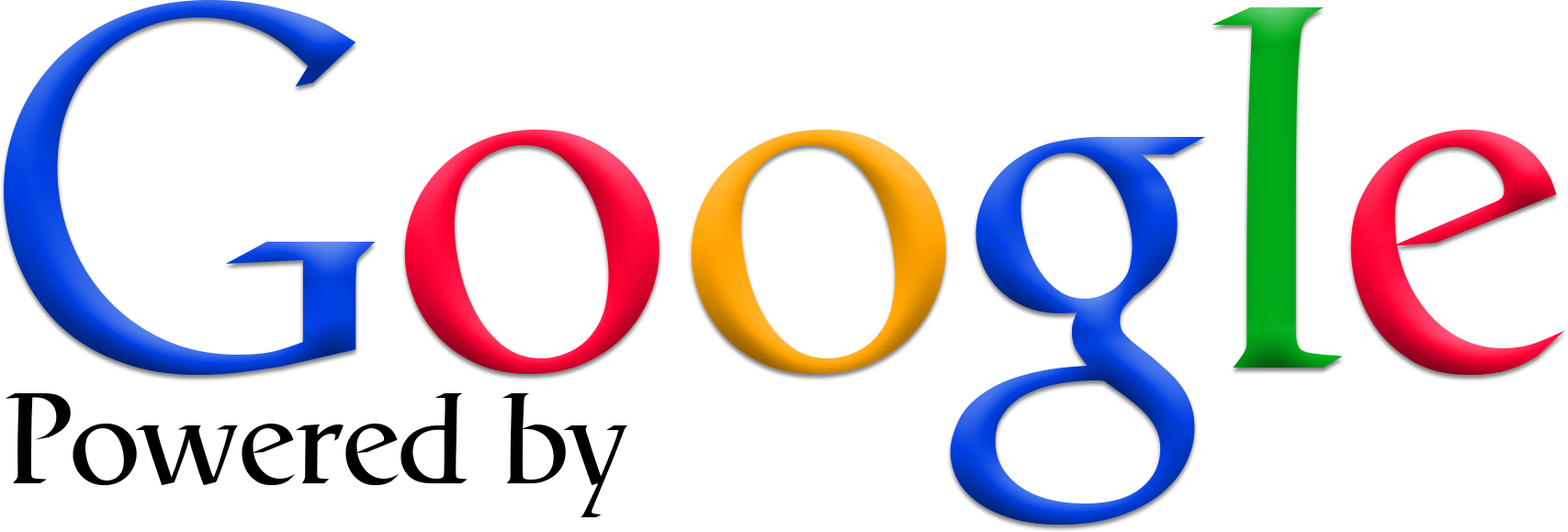
<style>
.page{position:relative;width:1568px;height:532px;background:#ffffff}
.page>*{position:absolute;margin:0}
.t1{font:510.1px "Catull-Regular"}
.t2{font:127.2px "Catull-Regular";color:#000000}
</style>
<div class="page">
<p class="t1" style="left:4px;top:0px;width:1561px;height:525px">Google</p>
<p class="t2" style="left:5px;top:393px;width:622px;height:124px">Powered by</p>
</div>
